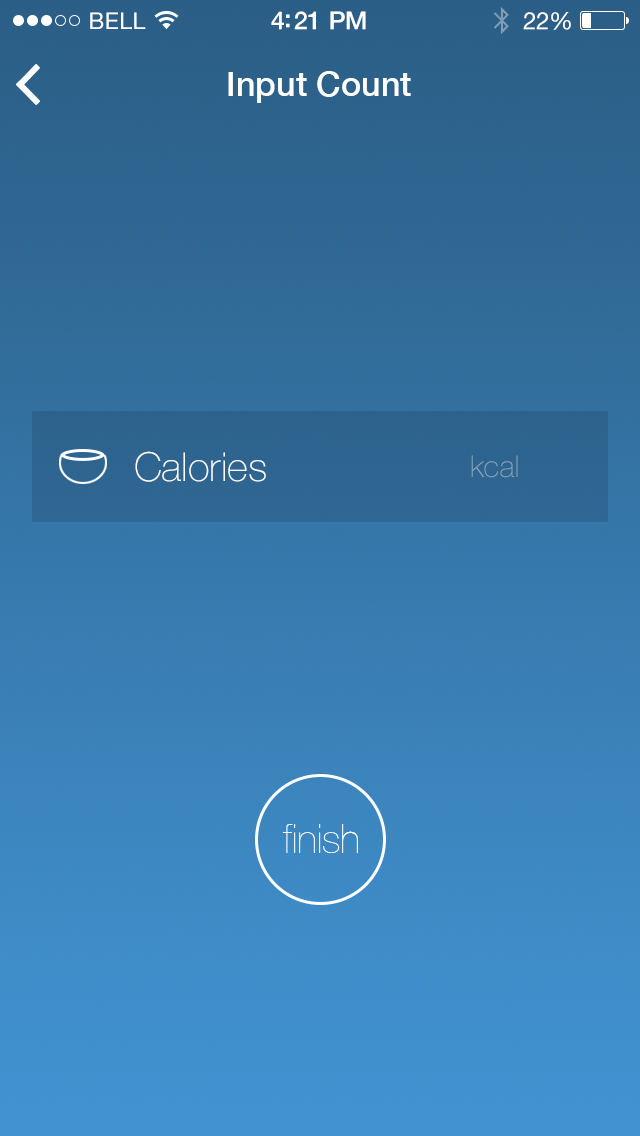
<style>
.page{position:relative;width:640px;height:1136px}
.page>*{position:absolute;margin:0}
.t1{font:23px "HelveticaNeue";letter-spacing:0.02em;color:#ffffff}
.t2{font:25px "HelveticaNeue-Medium";letter-spacing:-0.02em;color:#ffffff}
.t3{font:24px "HelveticaNeue";letter-spacing:-0.02em;color:#ffffff}
.t4{font:34px "HelveticaNeue-Medium";color:#ffffff}
.t5{font:40px "HelveticaNeue-Thin";color:#ffffff}
.t6{font:30px "HelveticaNeue-Thin";color:#8ca4ba}
.t7{font:40px "HelveticaNeue-UltraLight";color:#ffffff}
</style>
<div class="page">
<p class="t1" style="left:90px;top:12px;width:56px;height:17px">BELL</p>
<p class="t2" style="left:271px;top:11px;width:95px;height:19px">4:21 PM</p>
<p class="t3" style="left:523px;top:12px;width:48px;height:18px">22%</p>
<p class="t4" style="left:228px;top:71px;width:183px;height:32px">Input Count</p>
<p class="t5" style="left:135px;top:451px;width:131px;height:31px">Calories</p>
<p class="t6" style="left:471px;top:455px;width:47px;height:23px">kcal</p>
<p class="t7" style="left:282px;top:824px;width:76px;height:29px">finish</p>
</div>
